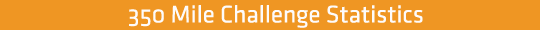
<style>
.page{position:relative;width:540px;height:30px;background:#ef9623}
.page>*{position:absolute;margin:0}
.t1{font:25px "KlavikaRegular-OSF";color:#fdfbfb}
</style>
<div class="page">
<p class="t1" style="left:129px;top:5px;width:294px;height:23px">350 Mile Challenge Statistics</p>
</div>
